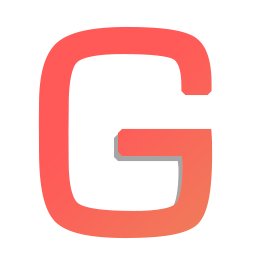
<style>
.page{position:relative;width:260px;height:260px;background:#ffffff}
.page>*{position:absolute;margin:0}
.t1{font:299px "EurostileRegular";letter-spacing:-0.05em;color:#ff5a58;text-transform:uppercase;font-weight:bold}
</style>
<div class="page">
<p class="t1" style="left:38px;top:26px;width:175px;height:213px">g</p>
</div>
